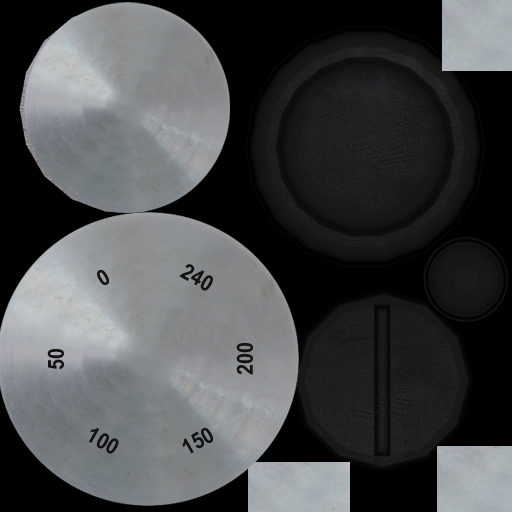
<style>
.page{position:relative;width:512px;height:512px;background:#000000}
.page>*{position:absolute;margin:0}
.t1{font:22.2px "Arial-BoldMT";color:#131313;scale:0.89 1}
</style>
<div class="page">
<p class="t1" style="left:97px;top:269px;width:12px;height:16px;rotate:-30deg">0</p>
<p class="t1" style="left:179px;top:264px;width:34px;height:27px;rotate:30deg">240</p>
<p class="t1" style="left:47px;top:349px;width:17px;height:20px;rotate:-90deg">50</p>
<p class="t1" style="left:236px;top:343px;width:17px;height:32px;rotate:-90deg">200</p>
<p class="t1" style="left:89px;top:428px;width:30px;height:26px;rotate:30deg">100</p>
<p class="t1" style="left:182px;top:427px;width:31px;height:27px;rotate:-30deg">150</p>
</div>
